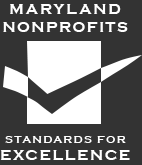
<style>
.page{position:relative;width:142px;height:165px;background:#333333}
.page>*{position:absolute;margin:0}
.t1{font:15.4px "CopperplateGothic-Bold";letter-spacing:0.075em;color:#ffffff}
.t2{font:15.4px "CopperplateGothic-Bold";letter-spacing:0.1em;color:#ffffff}
.t3{font:11.2px "CopperplateGothic-Bold";letter-spacing:0.1em;color:#ffffff}
.t4{font:15.1px "CopperplateGothic-Bold";letter-spacing:0.1em;color:#ffffff}
</style>
<div class="page">
<p class="t1" style="left:3px;top:4px;width:125px;height:28px;text-align:center"><span class="t2">MARYLAND<br></span>NONPROFITS</p>
<p class="t3" style="left:5px;top:136px;width:121px;height:7px">STANDARDS FOR</p>
<p class="t4" style="left:0px;top:150px;width:130px;height:10px">EXCELLENCE</p>
</div>
